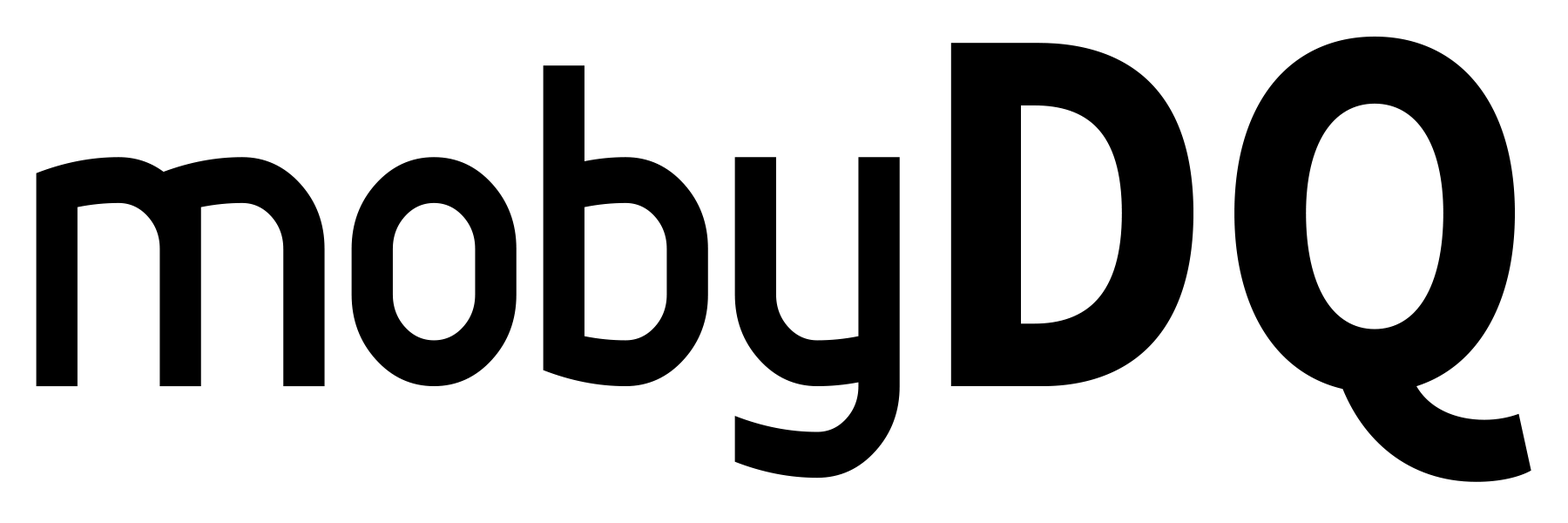
<style>
.page{position:relative;width:1568px;height:523px;background:#ffffff}
.page>*{position:absolute;margin:0}
.t1{font:468.2px "Bogotana";letter-spacing:0.005em;color:#000000;scale:0.9 1}
.t2{font:526.3px "SourceSansRoman-Bold";letter-spacing:-0.005em;color:#000000;font-weight:bold;scale:0.9 1}
</style>
<div class="page">
<p class="t1" style="left:36px;top:36px;width:1495px;height:446px">moby<span class="t2">DQ</span></p>
</div>
